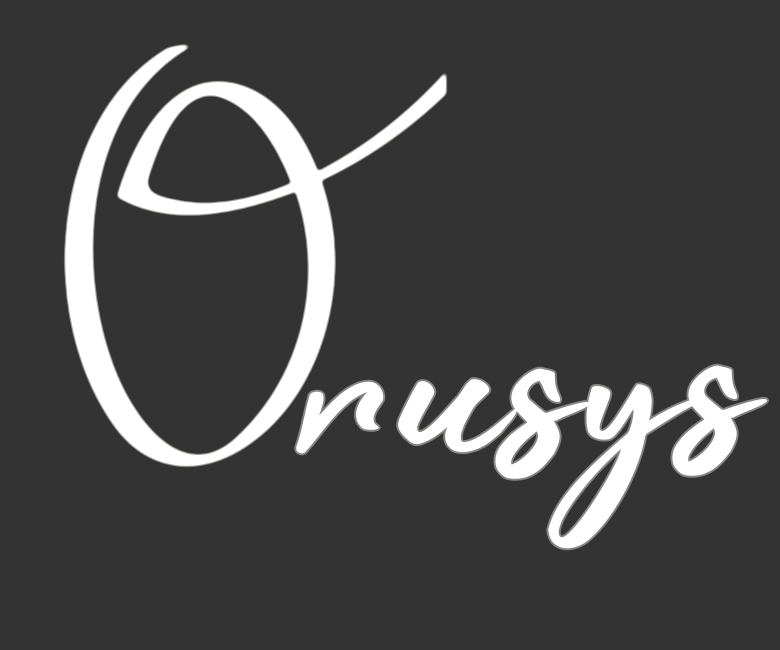
<style>
.page{position:relative;width:780px;height:650px;background:#333333}
.page>*{position:absolute;margin:0}
.t1{font:201.1px "Tahu!";letter-spacing:0.02em;color:#ffffff;scale:1.31 1}
</style>
<div class="page">
<p class="t1" style="left:296px;top:365px;width:472px;height:184px;rotate:-1deg">rusys</p>
</div>
